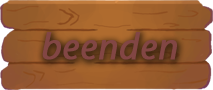
<style>
.page{position:relative;width:213px;height:90px}
.page>*{position:absolute;margin:0}
.t1{font:37.6px "MyriadPro-It";color:#824644;font-weight:bold}
</style>
<div class="page">
<p class="t1" style="left:42px;top:32px;width:135px;height:28px">beenden</p>
</div>
